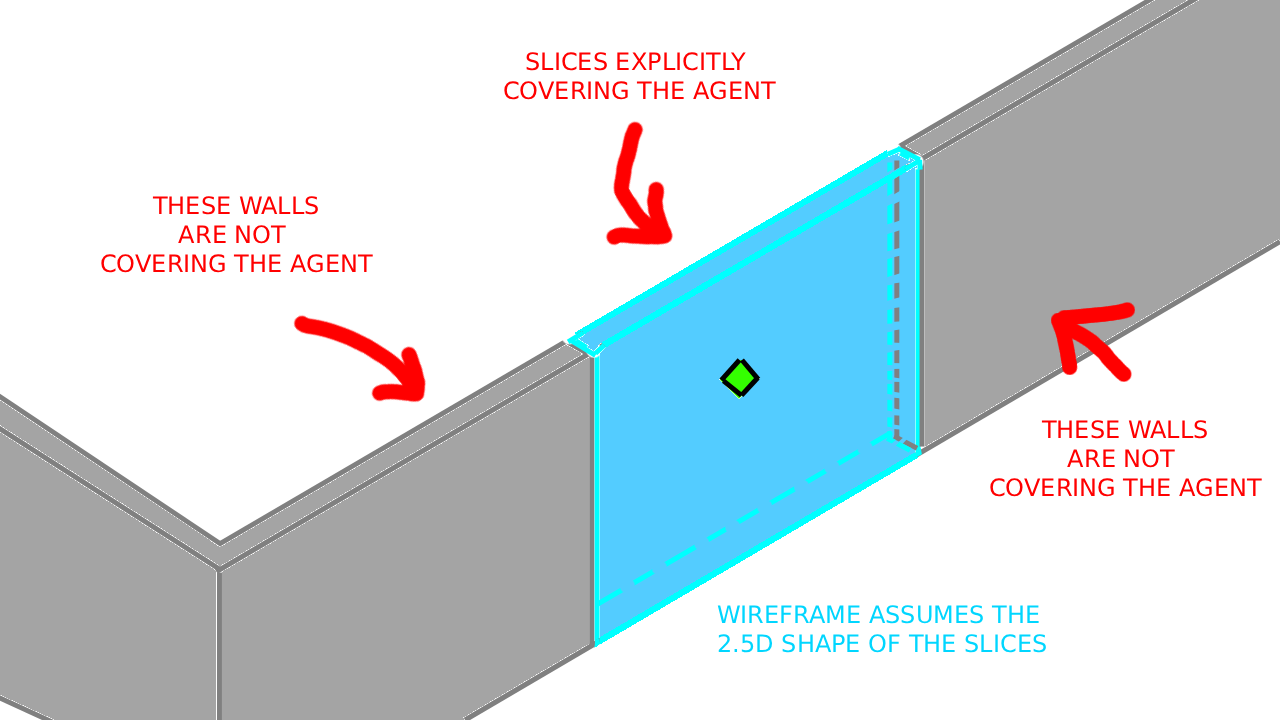
<style>
.page{position:relative;width:1280px;height:720px;background:#ffffff}
.page>*{position:absolute;margin:0}
.t1{font:24px "DejaVuSans";color:#ff0000}
.t2{font:24px "DejaVuSans";color:#00d6ff}
</style>
<div class="page">
<p class="t1" style="left:504px;top:52px;width:272px;height:48px;text-align:center">SLICES EXPLICITLY <br>COVERING THE AGENT</p>
<p class="t1" style="left:101px;top:196px;width:272px;height:77px;text-align:center">THESE WALLS<br>ARE NOT <br>COVERING THE AGENT</p>
<p class="t1" style="left:990px;top:420px;width:272px;height:77px;text-align:center">THESE WALLS<br>ARE NOT <br>COVERING THE AGENT</p>
<p class="t2" style="left:717px;top:605px;width:329px;height:48px;text-align:center">WIREFRAME ASSUMES THE <br>2.5D SHAPE OF THE SLICES</p>
</div>
